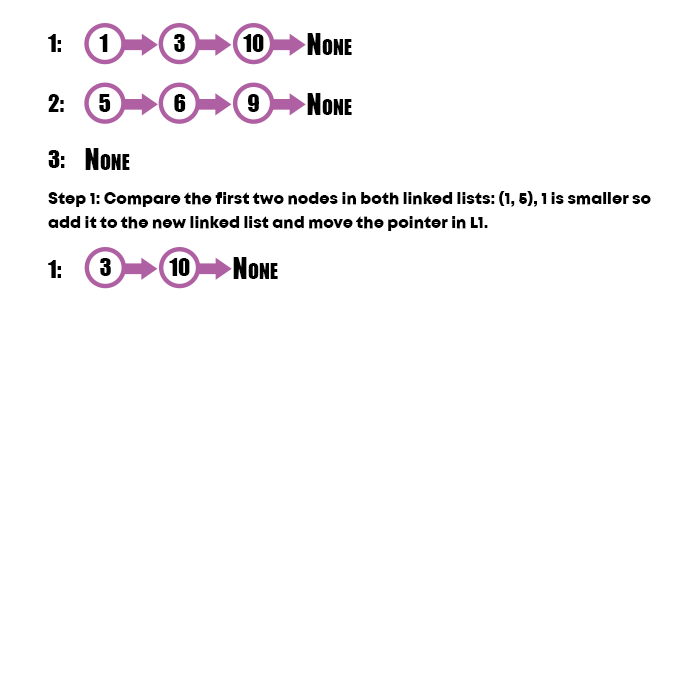
<style>
.page{position:relative;width:700px;height:700px;background:#ffffff}
.page>*{position:absolute;margin:0}
.t1{font:22.9px "Impact";color:#000000;font-variant:small-caps}
.t2{font:28.3px "Impact";color:#000000;font-variant:small-caps}
.t3{font:16px/24px "Mont-HeavyDEMO";color:#000000}
</style>
<div class="page">
<p class="t1" style="left:48px;top:34px;width:13px;height:18px">1:</p>
<p class="t1" style="left:99px;top:34px;width:9px;height:18px">1</p>
<p class="t1" style="left:174px;top:34px;width:11px;height:18px">3</p>
<p class="t1" style="left:243px;top:34px;width:21px;height:18px">10</p>
<p class="t2" style="left:307px;top:33px;width:45px;height:22px">None</p>
<p class="t1" style="left:48px;top:94px;width:16px;height:18px">2:</p>
<p class="t1" style="left:99px;top:94px;width:12px;height:18px">5</p>
<p class="t1" style="left:174px;top:94px;width:12px;height:18px">6</p>
<p class="t1" style="left:248px;top:94px;width:11px;height:18px">9</p>
<p class="t2" style="left:307px;top:93px;width:45px;height:22px">None</p>
<p class="t1" style="left:48px;top:150px;width:17px;height:18px">3:</p>
<p class="t2" style="left:85px;top:148px;width:45px;height:22px">None</p>
<p class="t3" style="left:48px;top:191px;width:603px;height:40px">Step 1: Compare the first two nodes in both linked lists: (1, 5), 1 is smaller so add it to the new linked list and move the pointer in L1.</p>
<p class="t2" style="left:233px;top:257px;width:45px;height:22px">None</p>
<p class="t1" style="left:48px;top:260px;width:13px;height:18px">1:</p>
<p class="t1" style="left:100px;top:258px;width:11px;height:18px">3</p>
<p class="t1" style="left:169px;top:258px;width:21px;height:18px">10</p>
</div>
